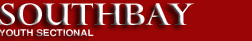
<style>
.page{position:relative;width:252px;height:41px;background:#9c0505}
.page>*{position:absolute;margin:0}
.t1{font:9px "ThonburiBold";scale:1.1 1}
.t2{font:30px "PerpetuaTitlingMT-Bold";scale:1.1 1}
</style>
<div class="page">
<p class="t1" style="left:0px;top:3px;width:194px;height:34px"><span class="t2">SOUTHBAY<br></span>YOUTH SECTIONAL</p>
</div>
